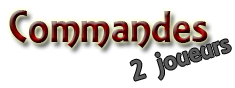
<style>
.page{position:relative;width:235px;height:88px;background:#ffffff}
.page>*{position:absolute;margin:0}
.t1{font:48px "ARESSENCE"}
.t2{font:30px "ARESSENCE";color:#5d5d5d}
</style>
<div class="page">
<p class="t1" style="left:9px;top:10px;width:199px;height:38px">Commandes</p>
<p class="t2" style="left:130px;top:39px;width:101px;height:42px;rotate:-17deg">2 joueurs</p>
</div>
